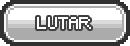
<style>
.page{position:relative;width:130px;height:46px;background:#ababab}
.page>*{position:absolute;margin:0}
.t1{font:16px "Minecraft";color:#ffffff}
</style>
<div class="page">
<p class="t1" style="left:37px;top:17px;width:54px;height:12px">LUTAR</p>
</div>
